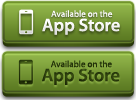
<style>
.page{position:relative;width:136px;height:100px}
.page>*{position:absolute;margin:0}
.t1{font:9.1px "MyriadPro-Regular";color:#f6f6f6}
.t2{font:18.2px "MyriadPro-Semibold";color:#f4f4f4}
.t3{font:9.1px "MyriadPro-Regular";color:#233209}
.t4{font:18.2px "MyriadPro-Semibold";color:#2d3f0d}
</style>
<div class="page">
<p class="t1" style="left:51px;top:10px;width:62px;height:8px">Available on the</p>
<p class="t2" style="left:42px;top:18px;width:78px;height:17px">App Store</p>
<p class="t3" style="left:51px;top:60px;width:61px;height:8px">Available on the</p>
<p class="t4" style="left:42px;top:68px;width:78px;height:17px">App Store</p>
</div>
